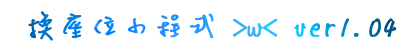
<style>
.page{position:relative;width:420px;height:50px;background:#ffffff}
.page>*{position:absolute;margin:0}
.t1{font:34.3px "DFLiu-W3-WIN-BF";letter-spacing:-0.09em;font-weight:bold}
</style>
<div class="page">
<p class="t1" style="left:28px;top:11px;width:369px;height:30px">換座位小程式 &gt;w&lt; ver1.04</p>
</div>
